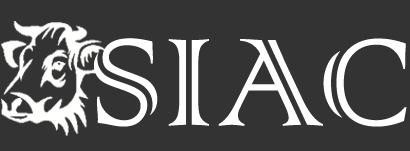
<style>
.page{position:relative;width:410px;height:151px;background:#333333}
.page>*{position:absolute;margin:0}
.t1{font:164.3px "ColonnaMT";color:#ffffff}
</style>
<div class="page">
<p class="t1" style="left:94px;top:38px;width:313px;height:89px">SIAC</p>
</div>
